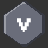
<style>
.page{position:relative;width:48px;height:48px;background:#6a6d7a}
.page>*{position:absolute;margin:0}
.t1{font:31.3px "ThaleahFat";letter-spacing:-0.01em;color:#ffffff}
</style>
<div class="page">
<p class="t1" style="left:17px;top:18px;width:14px;height:14px">V</p>
</div>
